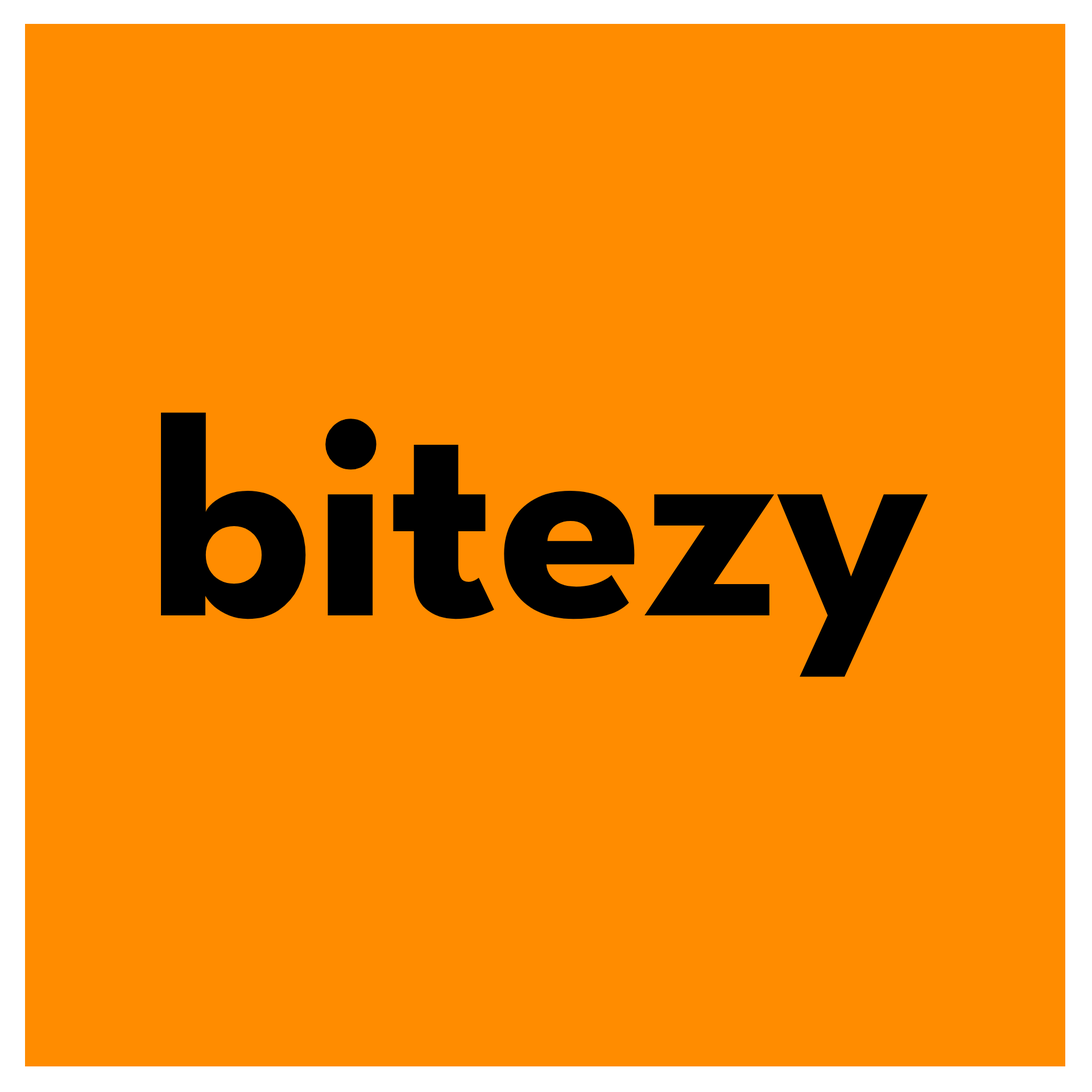
<style>
.page{position:relative;width:1092px;height:1092px;background:#ff8c00}
.page>*{position:absolute;margin:0}
.t1{font:294.8px "LeagueSpartan-Bold";color:#000000}
</style>
<div class="page">
<p class="t1" style="left:161px;top:412px;width:767px;height:265px">bitezy</p>
</div>
